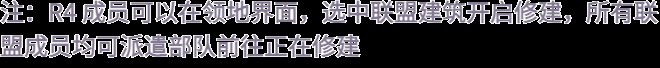
<style>
.page{position:relative;width:660px;height:68px;background:#000000}
.page>*{position:absolute;margin:0}
.t1{font:24px/34px "WebPSD-18463539-0-Regular";color:#837a91;font-weight:bold}
</style>
<div class="page">
<p class="t1" style="left:0px;top:0px;width:660px;height:68px">注：R4 成员可以在领地界面，选中联盟建筑开启修建，所有联<br>盟成员均可派遣部队前往正在修建</p>
</div>
